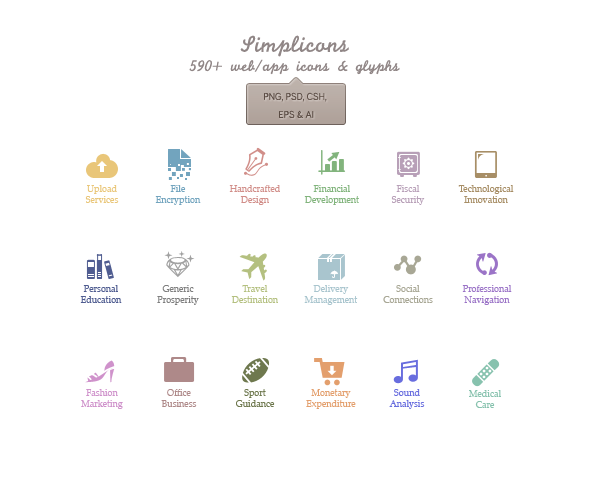
<style>
.page{position:relative;width:590px;height:500px;background:#ffffff}
.page>*{position:absolute;margin:0}
.t1{font:9px "Palatino-Roman";color:#e9c679}
.t2{font:9px "Palatino-Roman";color:#72a4be}
.t3{font:9px "Palatino-Roman";color:#d18e89}
.t4{font:9px "Palatino-Roman";color:#82b47d}
.t5{font:9px "Palatino-Roman";color:#b8a0b8}
.t6{font:9px "Palatino-Roman";color:#a78e66}
.t7{font:9px "Palatino-Roman";color:#4f5c90}
.t8{font:9px "Palatino-Roman";color:#7e7e7e}
.t9{font:9px "Palatino-Roman";color:#b4c080}
.t10{font:9px "Palatino-Roman";color:#a9c5ce}
.t11{font:9px "Palatino-Roman";color:#a8a795}
.t12{font:9px "Palatino-Roman";color:#9b74c7}
.t13{font:9px "Palatino-Roman";color:#cf92cb}
.t14{font:9px "Palatino-Roman";color:#ae8989}
.t15{font:9px "Palatino-Roman";color:#6e784e}
.t16{font:9px "Palatino-Roman";color:#e39f6d}
.t17{font:9px "Palatino-Roman";color:#686dde}
.t18{font:9px "Palatino-Roman";color:#87c2ae}
</style>
<div class="page">
<p class="t1" style="left:85px;top:185px;width:34px;height:18px;text-align:center">Upload<br>Services</p>
<p class="t2" style="left:155px;top:185px;width:46px;height:20px;text-align:center">File<br>Encryption</p>
<p class="t3" style="left:229px;top:185px;width:51px;height:20px;text-align:center">Handcrafted<br>Design</p>
<p class="t4" style="left:304px;top:185px;width:55px;height:20px;text-align:center">Financial<br>Development</p>
<p class="t5" style="left:391px;top:185px;width:34px;height:20px;text-align:center">Fiscal<br>Security</p>
<p class="t6" style="left:458px;top:185px;width:56px;height:18px;text-align:center">Technological<br>Innovation</p>
<p class="t7" style="left:80px;top:285px;width:42px;height:18px;text-align:center">Personal<br>Education</p>
<p class="t8" style="left:157px;top:285px;width:42px;height:20px;text-align:center">Generic<br>Prosperity</p>
<p class="t9" style="left:231px;top:285px;width:47px;height:18px;text-align:center">Travel<br>Destination</p>
<p class="t10" style="left:304px;top:285px;width:54px;height:20px;text-align:center">Delivery<br>Management</p>
<p class="t11" style="left:383px;top:285px;width:50px;height:18px;text-align:center">Social<br>Connections</p>
<p class="t12" style="left:462px;top:285px;width:50px;height:20px;text-align:center">Professional<br>Navigation</p>
<p class="t13" style="left:81px;top:389px;width:42px;height:20px;text-align:center">Fashion<br>Marketing</p>
<p class="t14" style="left:161px;top:389px;width:36px;height:18px;text-align:center">Office<br>Business</p>
<p class="t15" style="left:236px;top:389px;width:39px;height:18px;text-align:center">Sport<br>Guidance</p>
<p class="t16" style="left:306px;top:389px;width:50px;height:20px;text-align:center">Monetary<br>Expenditure</p>
<p class="t17" style="left:389px;top:389px;width:36px;height:20px;text-align:center">Sound<br>Analysis</p>
<p class="t18" style="left:469px;top:390px;width:32px;height:18px;text-align:center">Medical<br>Care</p>
</div>
